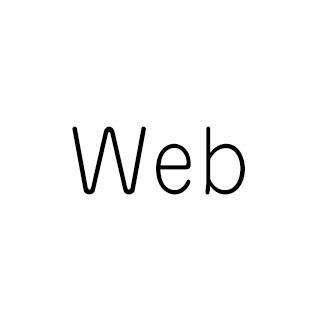
<style>
.page{position:relative;width:320px;height:320px;background:#ffffff}
.page>*{position:absolute;margin:0}
.t1{font:82.4px "Jun101Pro-Light";color:#000000}
</style>
<div class="page">
<p class="t1" style="left:72px;top:126px;width:173px;height:69px">Web</p>
</div>
